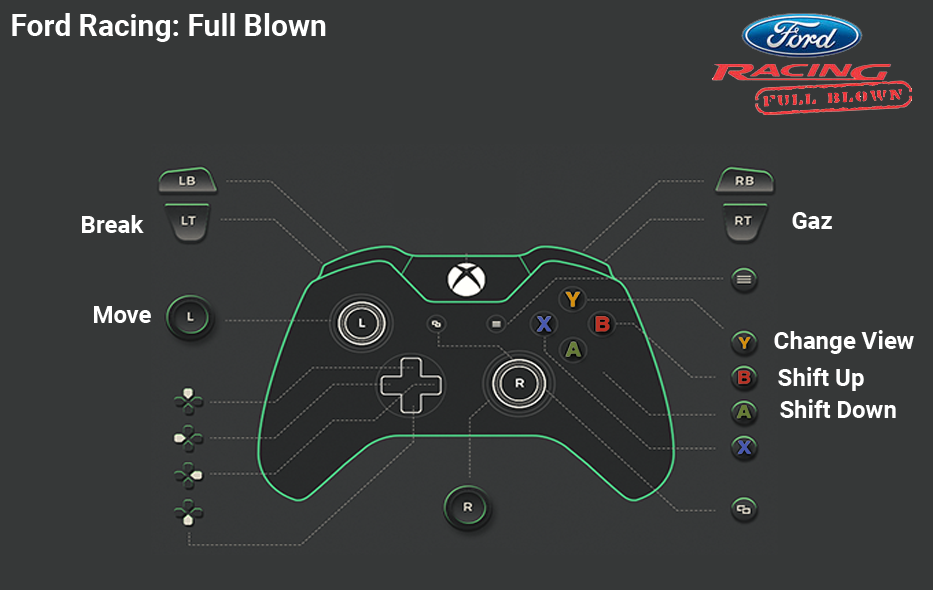
<style>
.page{position:relative;width:933px;height:590px;background:#363838}
.page>*{position:absolute;margin:0}
.t1{font:30px "Roboto-Bold";color:#ffffff}
.t2{font:24px "Roboto-Bold";color:#ffffff}
</style>
<div class="page">
<p class="t1" style="left:12px;top:13px;width:314px;height:29px">Ford Racing: Full Blown</p>
<p class="t2" style="left:82px;top:215px;width:62px;height:18px">Break</p>
<p class="t2" style="left:792px;top:212px;width:40px;height:17px">Gaz</p>
<p class="t2" style="left:94px;top:306px;width:57px;height:17px">Move</p>
<p class="t2" style="left:774px;top:330px;width:140px;height:24px">Change View</p>
<p class="t2" style="left:778px;top:367px;width:86px;height:24px">Shift Up</p>
<p class="t2" style="left:780px;top:399px;width:116px;height:19px">Shift Down</p>
</div>
